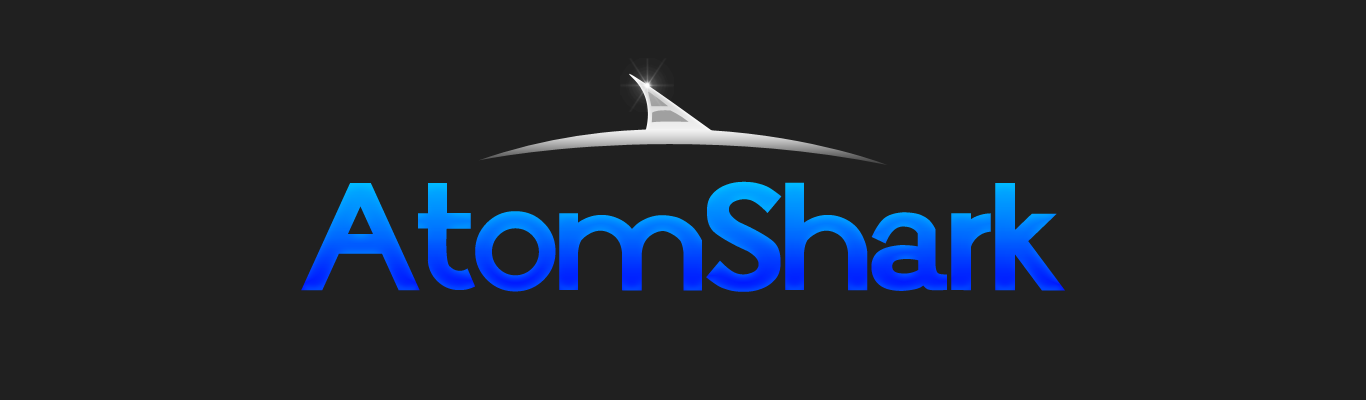
<style>
.page{position:relative;width:1366px;height:400px;background:#202020}
.page>*{position:absolute;margin:0}
.t1{font:117.6px "Vieira"}
</style>
<div class="page">
<p class="t1" style="left:301px;top:181px;width:764px;height:111px">AtomShark</p>
</div>
